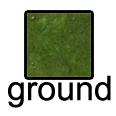
<style>
.page{position:relative;width:116px;height:116px;background:#ffffff}
.page>*{position:absolute;margin:0}
.t1{font:34px "ArialMT";color:#000000}
</style>
<div class="page">
<p class="t1" style="left:8px;top:75px;width:103px;height:33px">ground</p>
</div>
